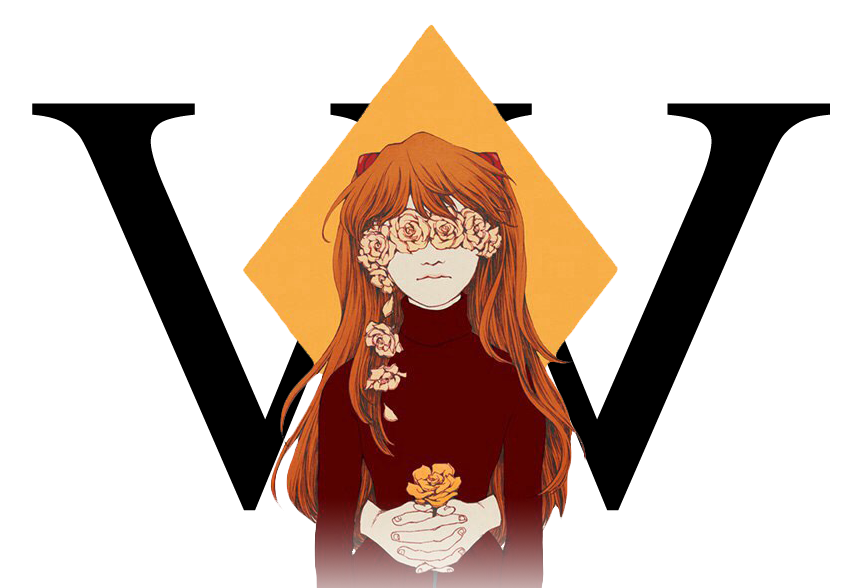
<style>
.page{position:relative;width:862px;height:588px;background:#ffffff}
.page>*{position:absolute;margin:0}
.t1{font:600px "TimesNewRomanPSMT";color:#000000}
</style>
<div class="page">
<p class="t1" style="left:32px;top:103px;width:421px;height:408px">V</p>
<p class="t1" style="left:409px;top:103px;width:421px;height:408px;rotate:180deg">V</p>
</div>
